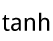
<style>
.page{position:relative;width:53px;height:41px;background:#ffffff}
.page>*{position:absolute;margin:0}
.t1{font:23.7px "DroidSans";color:#000000}
</style>
<div class="page">
<p class="t1" style="left:2px;top:12px;width:48px;height:19px">tanh</p>
</div>
